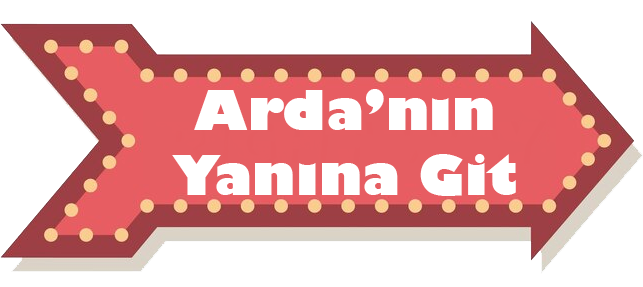
<style>
.page{position:relative;width:643px;height:287px;background:#ffffff}
.page>*{position:absolute;margin:0}
.t1{font:54.2px "GillSans-UltraBold";color:#ffffff}
</style>
<div class="page">
<p class="t1" style="left:172px;top:89px;width:344px;height:107px;text-align:center">Arda’nın<br>Yanına Git</p>
</div>
